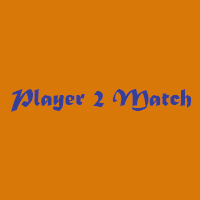
<style>
.page{position:relative;width:200px;height:200px;background:#d87809}
.page>*{position:absolute;margin:0}
.t1{font:25px "MaturaMTScriptCapitals";color:#343f99}
</style>
<div class="page">
<p class="t1" style="left:11px;top:89px;width:179px;height:23px">Player 1 Match</p>
<p class="t1" style="left:11px;top:89px;width:181px;height:23px">Player 2 Match</p>
</div>
